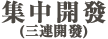
<style>
.page{position:relative;width:108px;height:39px;background:#ffffff}
.page>*{position:absolute;margin:0}
.t1{font:14px/24px "RyuminPr6N-ExBold";color:#4c4843;font-weight:bold}
.t2{font:24px/24px "RyuminPr6N-ExBold";letter-spacing:0.1em;color:#4c4843;font-weight:bold}
</style>
<div class="page">
<p class="t1" style="left:1px;top:0px;width:105px;height:39px;text-align:center"><span class="t2">集中開發<br></span>(三連開發)</p>
</div>
